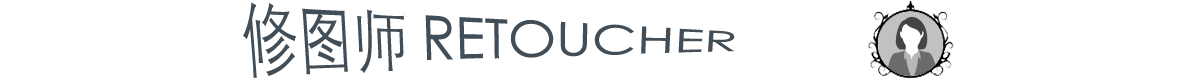
<style>
.page{position:relative;width:1200px;height:80px;background:#ffffff}
.page>*{position:absolute;margin:0}
.t1{font:55px "STXihei";color:#424e57}
</style>
<div class="page">
<p class="t1" style="left:243px;top:2px;width:492px;height:76px">修图师 RETOUCHER</p>
</div>
